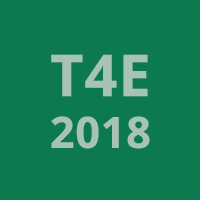
<style>
.page{position:relative;width:200px;height:200px;background:#0c794e}
.page>*{position:absolute;margin:0}
.t1{font:43.2px "OpenSans-Bold";letter-spacing:0.018em;color:#a6c3b5}
.t2{font:57.6px "OpenSans-Bold";letter-spacing:0.018em;color:#a6c3b5}
</style>
<div class="page">
<p class="t1" style="left:51px;top:54px;width:99px;height:95px;text-align:center"><span class="t2">T4E<br></span>2018</p>
</div>
